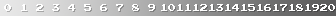
<style>
.page{position:relative;width:336px;height:16px}
.page>*{position:absolute;margin:0}
.t1{font:8px "PressStart2P";color:#ffffff}
</style>
<div class="page">
<p class="t1" style="left:4px;top:4px;width:7px;height:7px">0</p>
<p class="t1" style="left:21px;top:4px;width:6px;height:7px">1</p>
<p class="t1" style="left:36px;top:4px;width:7px;height:7px">2</p>
<p class="t1" style="left:52px;top:4px;width:7px;height:7px">3</p>
<p class="t1" style="left:68px;top:4px;width:7px;height:7px">4</p>
<p class="t1" style="left:84px;top:4px;width:7px;height:7px">5</p>
<p class="t1" style="left:100px;top:4px;width:7px;height:7px">6</p>
<p class="t1" style="left:116px;top:4px;width:7px;height:7px">7</p>
<p class="t1" style="left:132px;top:4px;width:7px;height:7px">8</p>
<p class="t1" style="left:148px;top:4px;width:7px;height:7px">9</p>
<p class="t1" style="left:161px;top:4px;width:14px;height:7px">10</p>
<p class="t1" style="left:177px;top:4px;width:14px;height:7px">11</p>
<p class="t1" style="left:193px;top:4px;width:14px;height:7px">12</p>
<p class="t1" style="left:209px;top:4px;width:14px;height:7px">13</p>
<p class="t1" style="left:225px;top:4px;width:14px;height:7px">14</p>
<p class="t1" style="left:241px;top:4px;width:14px;height:7px">15</p>
<p class="t1" style="left:257px;top:4px;width:14px;height:7px">16</p>
<p class="t1" style="left:273px;top:4px;width:14px;height:7px">17</p>
<p class="t1" style="left:289px;top:4px;width:14px;height:7px">18</p>
<p class="t1" style="left:305px;top:4px;width:14px;height:7px">19</p>
<p class="t1" style="left:320px;top:4px;width:15px;height:7px">20</p>
</div>
